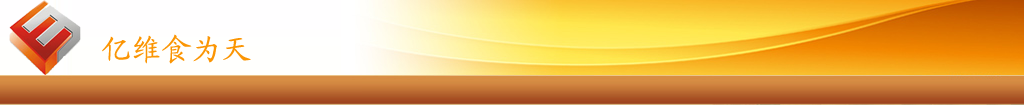
<style>
.page{position:relative;width:1024px;height:105px}
.page>*{position:absolute;margin:0}
.t1{font:30px "KaiTi_GB2312";color:#fb9503}
</style>
<div class="page">
<p class="t1" style="left:102px;top:34px;width:149px;height:30px">亿维食为天</p>
</div>
